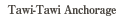
<style>
.page{position:relative;width:124px;height:18px;background:#ffffff}
.page>*{position:absolute;margin:0}
.t1{font:12px "RyuminPro-ExBold";letter-spacing:-0.04em;color:#4c4843;scale:0.9 1}
</style>
<div class="page">
<p class="t1" style="left:7px;top:5px;width:109px;height:11px">Tawi-Tawi Anchorage</p>
</div>
